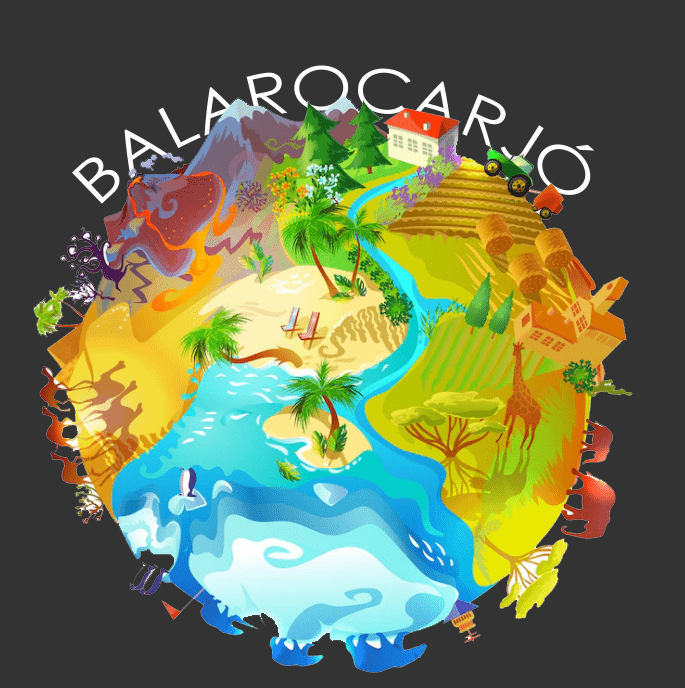
<style>
.page{position:relative;width:685px;height:688px;background:#333333}
.page>*{position:absolute;margin:0}
.t1{font:60px "CenturyGothic";color:#ffffff}
</style>
<div class="page">
<p class="t1" style="left:72px;top:65px;width:523px;height:139px">BALAROCARJÓ</p>
</div>
